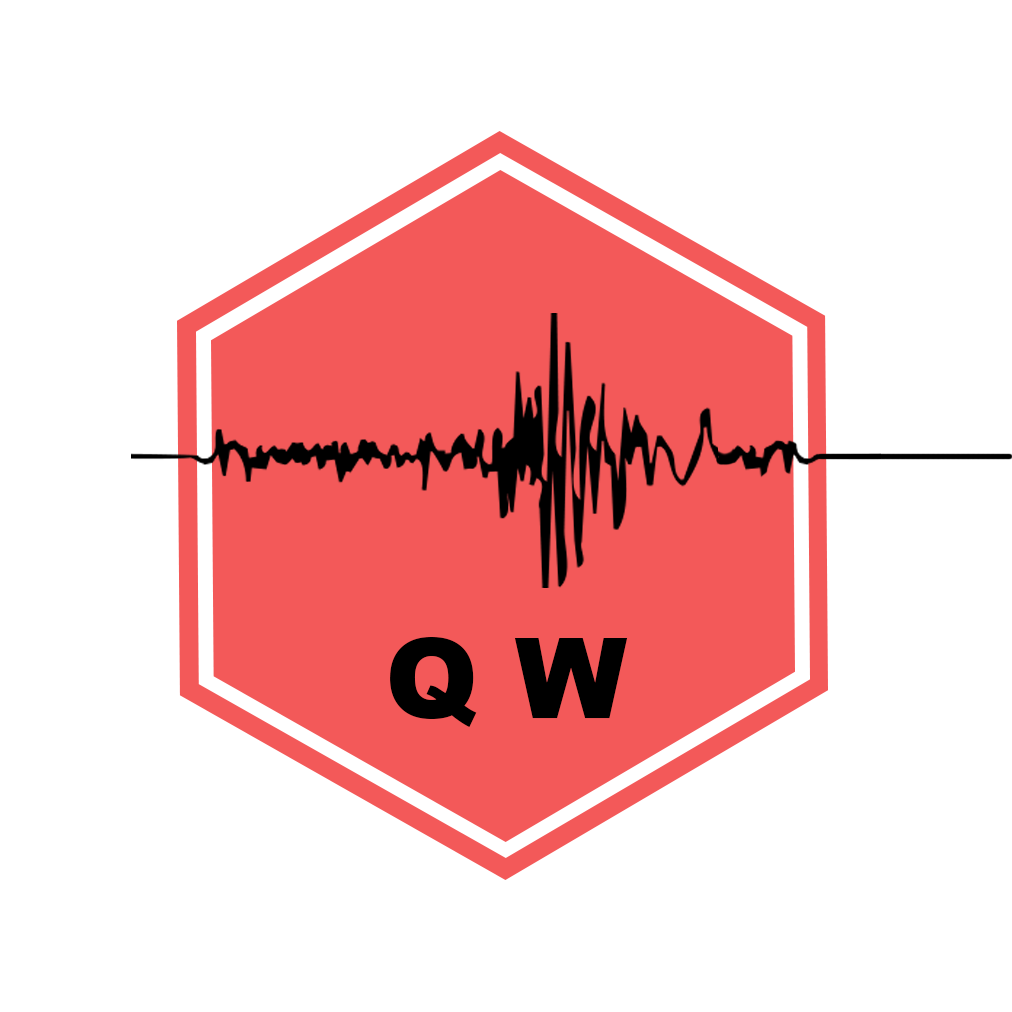
<style>
.page{position:relative;width:1012px;height:1012px;background:#ffffff}
.page>*{position:absolute;margin:0}
.t1{font:111.6px "Arial-Black";color:#000000}
</style>
<div class="page">
<p class="t1" style="left:390px;top:637px;width:238px;height:90px">Q W</p>
</div>
